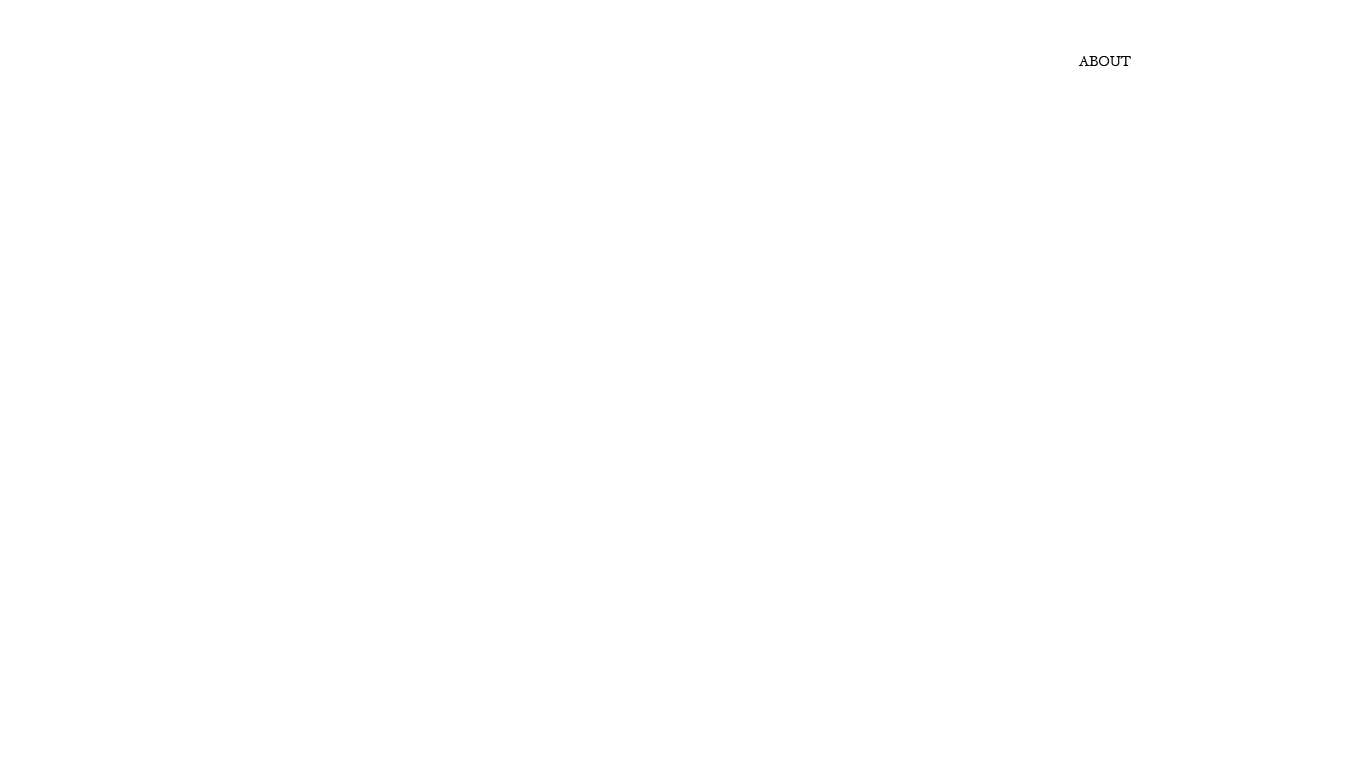
<style>
.page{position:relative;width:1366px;height:768px;background:#ffffff}
.page>*{position:absolute;margin:0}
.t1{font:14px "HoeflerText-Regular";color:#000000}
</style>
<div class="page">
<p class="t1" style="left:1078px;top:56px;width:53px;height:10px">ABOUT</p>
</div>
